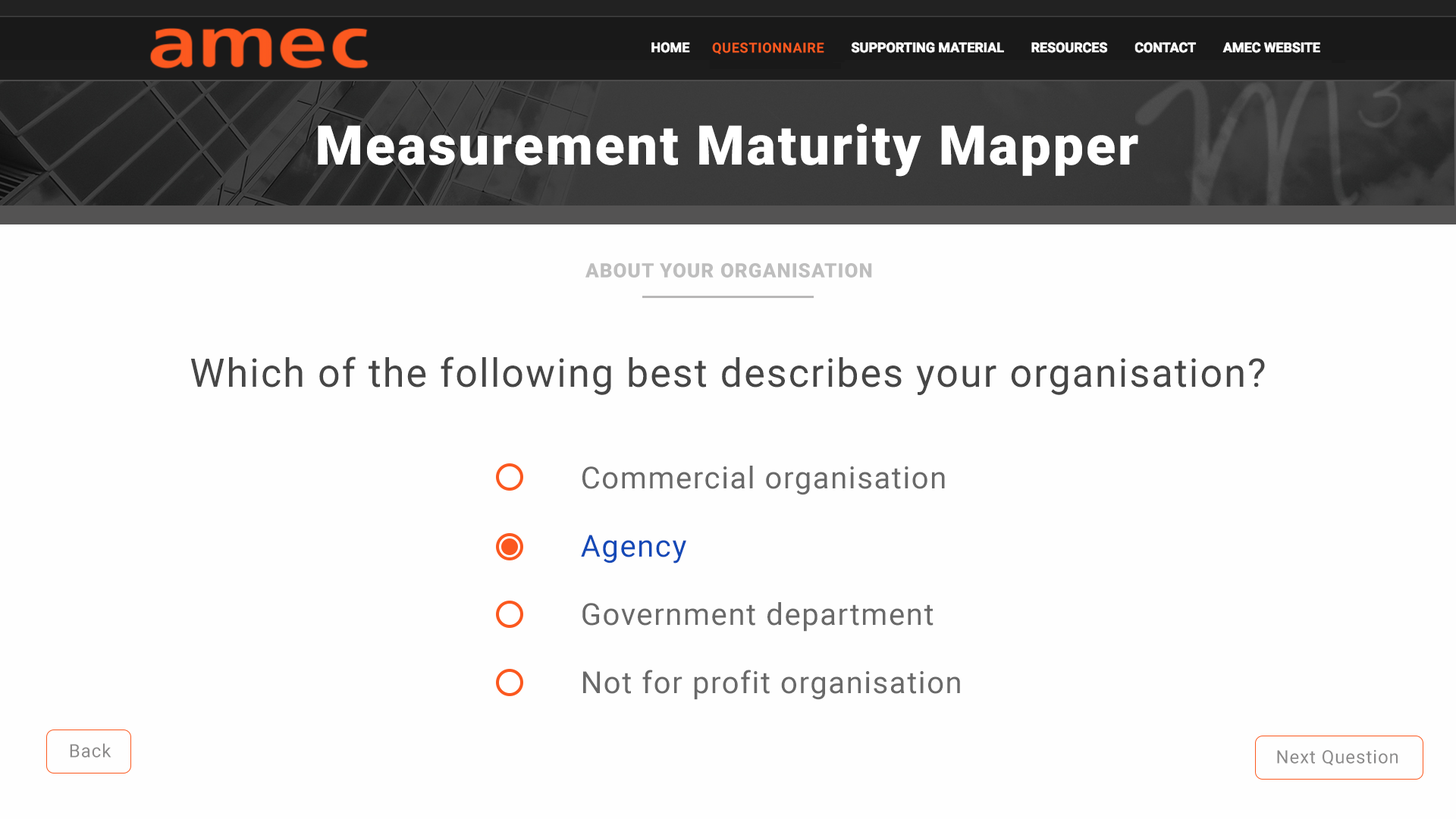
<style>
.page{position:relative;width:1456px;height:819px;background:#fefefe}
.page>*{position:absolute;margin:0}
.t1{font:13.6px "Roboto-Bold";letter-spacing:0.04em;color:#fb591f}
.t2{font:54.6px "Roboto-Black";letter-spacing:0.04em;color:#ffffff}
.t3{font:19.7px "Roboto-Black";letter-spacing:0.04em;color:#bebebe}
.t4{font:39.4px "Roboto-Regular";letter-spacing:0.04em;color:#464646}
.t5{font:30.3px/68.2px "Roboto-Regular";letter-spacing:0.04em;color:#696969}
.t6{font:30.3px/68.2px "Roboto-Regular";letter-spacing:0.04em;color:#1349b7}
.t7{font:18.2px "Roboto-Regular";letter-spacing:0.04em;color:#8b8a8a}
</style>
<div class="page">
<p class="t1" style="left:712px;top:42px;width:112px;height:13px">QUESTIONNAIRE</p>
<p class="t2" style="left:318px;top:124px;width:820px;height:53px">Measurement Maturity Mapper</p>
<p class="t3" style="left:585px;top:263px;width:287px;height:15px">ABOUT YOUR ORGANISATION</p>
<p class="t4" style="left:190px;top:356px;width:1075px;height:39px">Which of the following best describes your organisation?</p>
<p class="t5" style="left:581px;top:466px;width:379px;height:234px">Commercial organisation<br><span class="t6">Agency<br></span>Government department<br>Not for profit organisation</p>
<p class="t7" style="left:70px;top:743px;width:41px;height:15px">Back</p>
<p class="t7" style="left:1277px;top:750px;width:121px;height:16px">Next Question</p>
</div>
